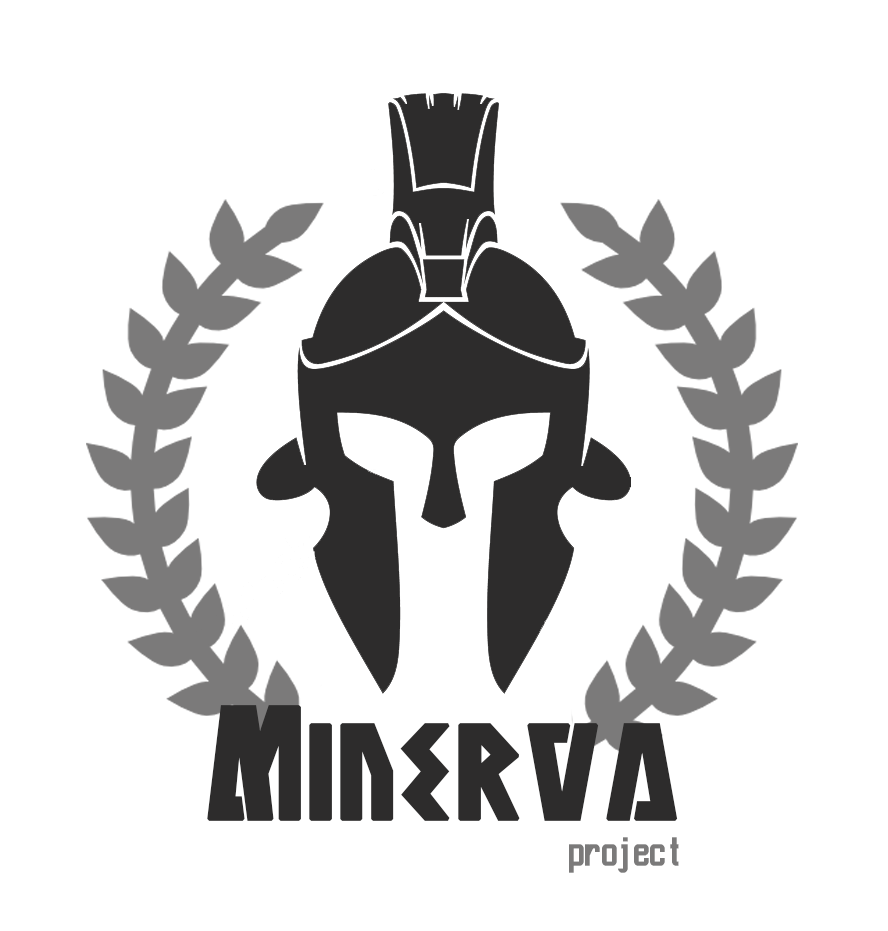
<style>
.page{position:relative;width:888px;height:931px;background:#ffffff}
.page>*{position:absolute;margin:0}
.t1{font:138.9px "Antikythera";color:#2d2c2c;font-weight:bold;scale:0.95 1}
.t2{font:55.6px "Aeroport";color:#7b7a7a;font-weight:bold;scale:0.95 1}
</style>
<div class="page">
<p class="t1" style="left:207px;top:705px;width:471px;height:116px">Minerva</p>
<p class="t2" style="left:569px;top:837px;width:110px;height:36px">project</p>
</div>
